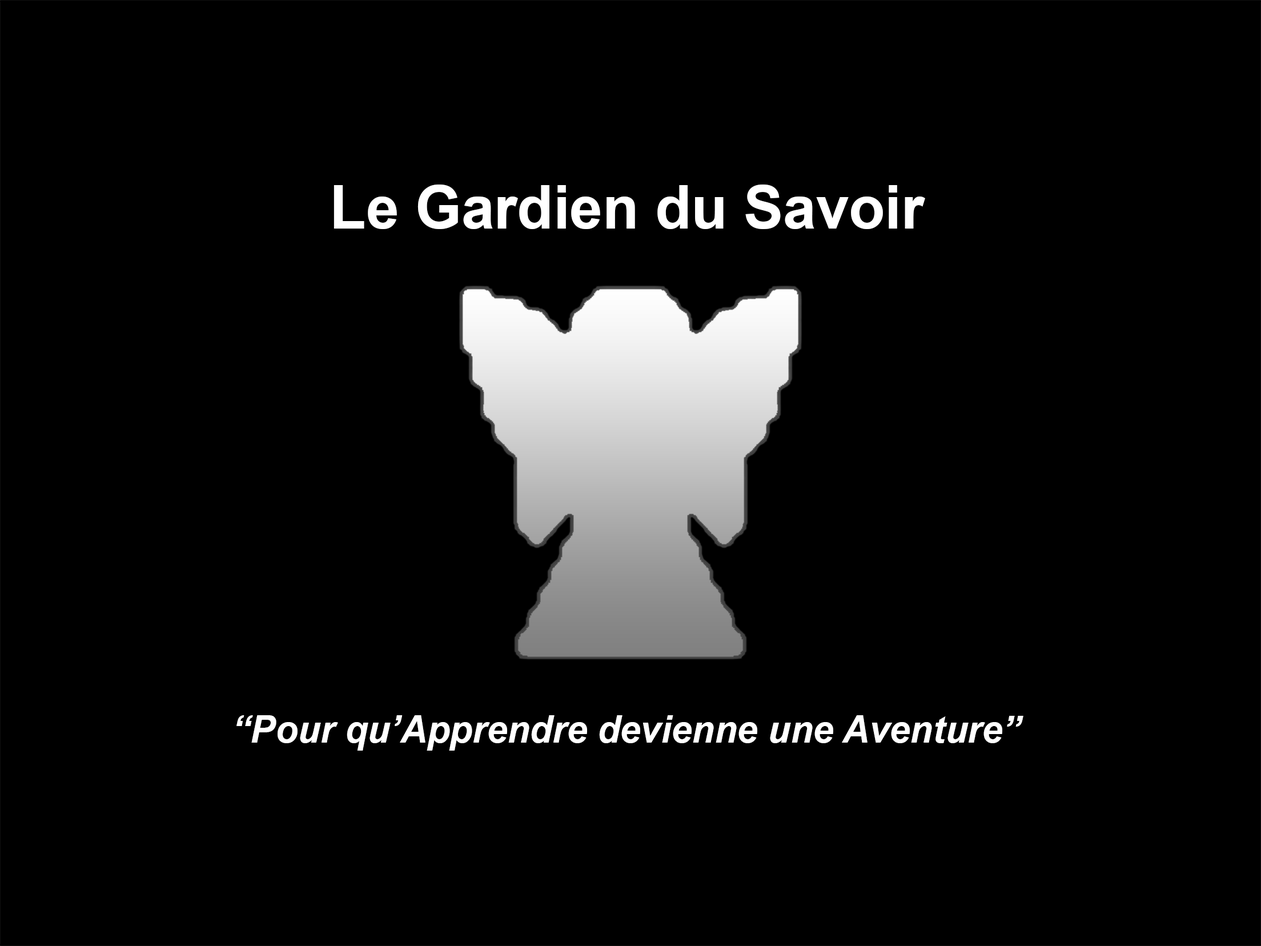
<style>
.page{position:relative;width:1261px;height:946px;background:#000000}
.page>*{position:absolute;margin:0}
.t1{font:60.7px "Arial-BoldMT";color:#ffffff}
.t2{font:37.9px "Arial-BoldItalicMT";color:#ffffff}
</style>
<div class="page">
<p class="t1" style="left:334px;top:184px;width:591px;height:45px">Le Gardien du Savoir</p>
<p class="t2" style="left:236px;top:715px;width:787px;height:35px">“Pour qu’Apprendre devienne une Aventure”</p>
</div>
